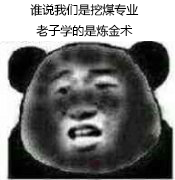
<style>
.page{position:relative;width:175px;height:180px}
.page>*{position:absolute;margin:0}
.t1{font:12px "MicrosoftYaHei";color:#000000}
</style>
<div class="page">
<p class="t1" style="left:30px;top:3px;width:109px;height:34px;text-align:center">谁说我们是挖煤专业<br>老子学的是炼金术</p>
</div>
